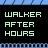
<style>
.page{position:relative;width:48px;height:48px;background:#000000}
.page>*{position:absolute;margin:0}
.t1{font:8px "Hooge0553";color:#c5f0c5}
</style>
<div class="page">
<p class="t1" style="left:5px;top:12px;width:36px;height:24px">WALKER<br>After<br>Hours</p>
</div>
